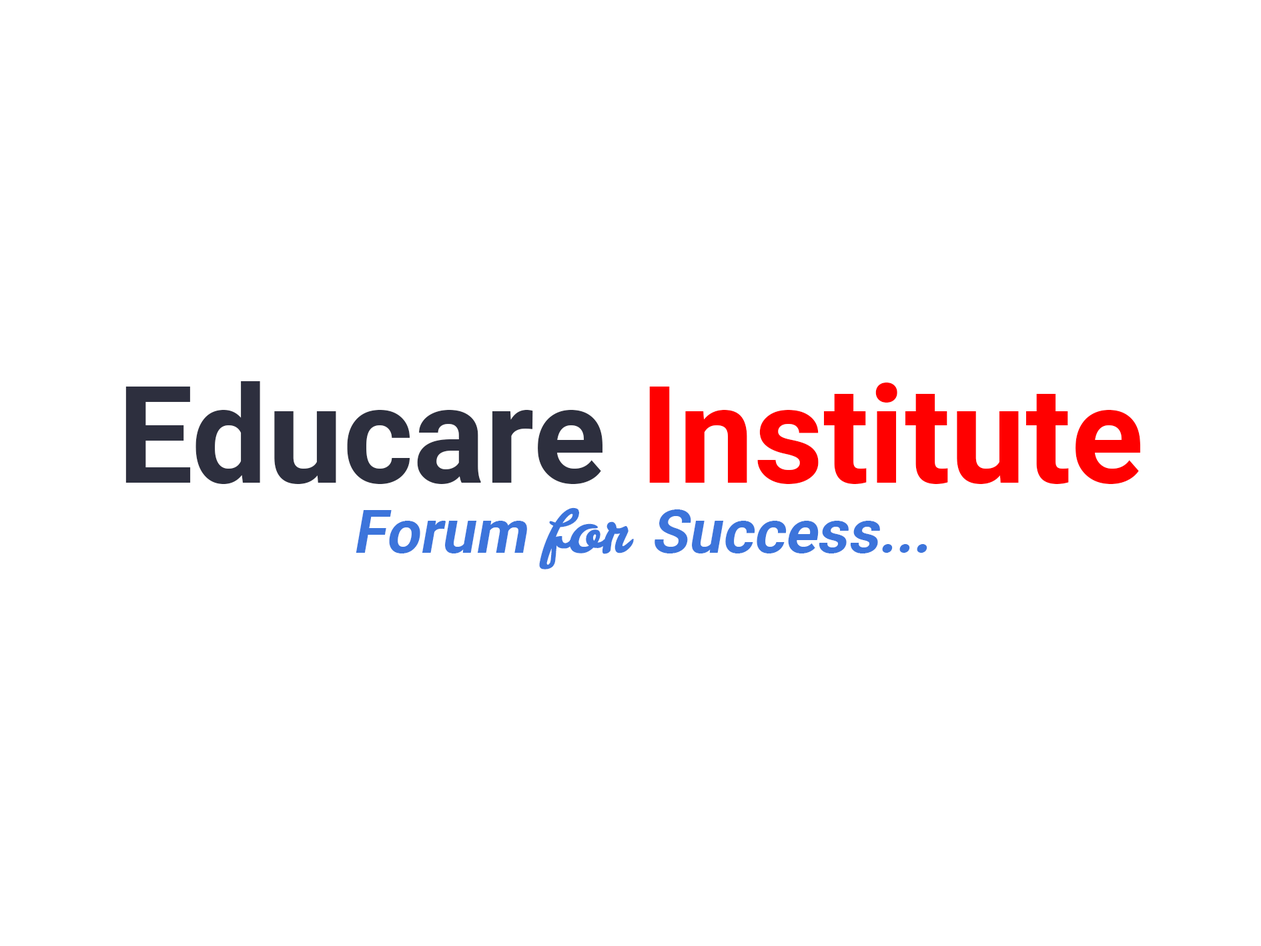
<style>
.page{position:relative;width:1261px;height:946px;background:#ffffff}
.page>*{position:absolute;margin:0}
.t1{font:134.7px "Roboto-Bold";color:#ff0000}
.t2{font:134.7px "Roboto-Bold";color:#2d2f3e}
.t3{font:33.4px "Roboto-Bold";color:#ff0000}
.t4{font:60.1px "Roboto-Bold";color:#3c74db;font-style:italic}
.t5{font:60.1px "LeckerliOne-Regular";color:#3c74db;font-style:italic}
</style>
<div class="page">
<p class="t1" style="left:125px;top:381px;width:1015px;height:103px"><span class="t2">Educare </span>Institute<br><span class="t3"></span></p>
<p class="t4" style="left:356px;top:507px;width:572px;height:62px">Forum <span class="t5">for </span>Success...</p>
</div>
